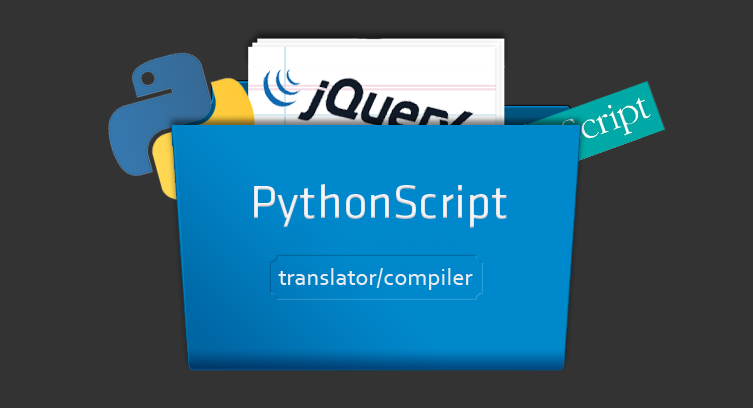
<style>
.page{position:relative;width:753px;height:408px;background:#333333}
.page>*{position:absolute;margin:0}
.t1{font:48px "KlavikaRegular-Plain";color:#f3f5fa}
.t2{font:24px "Corbel";color:#e9ebf0}
</style>
<div class="page">
<p class="t1" style="left:254px;top:184px;width:253px;height:44px">PythonScript</p>
<p class="t2" style="left:278px;top:268px;width:195px;height:22px">translator/compiler</p>
</div>
